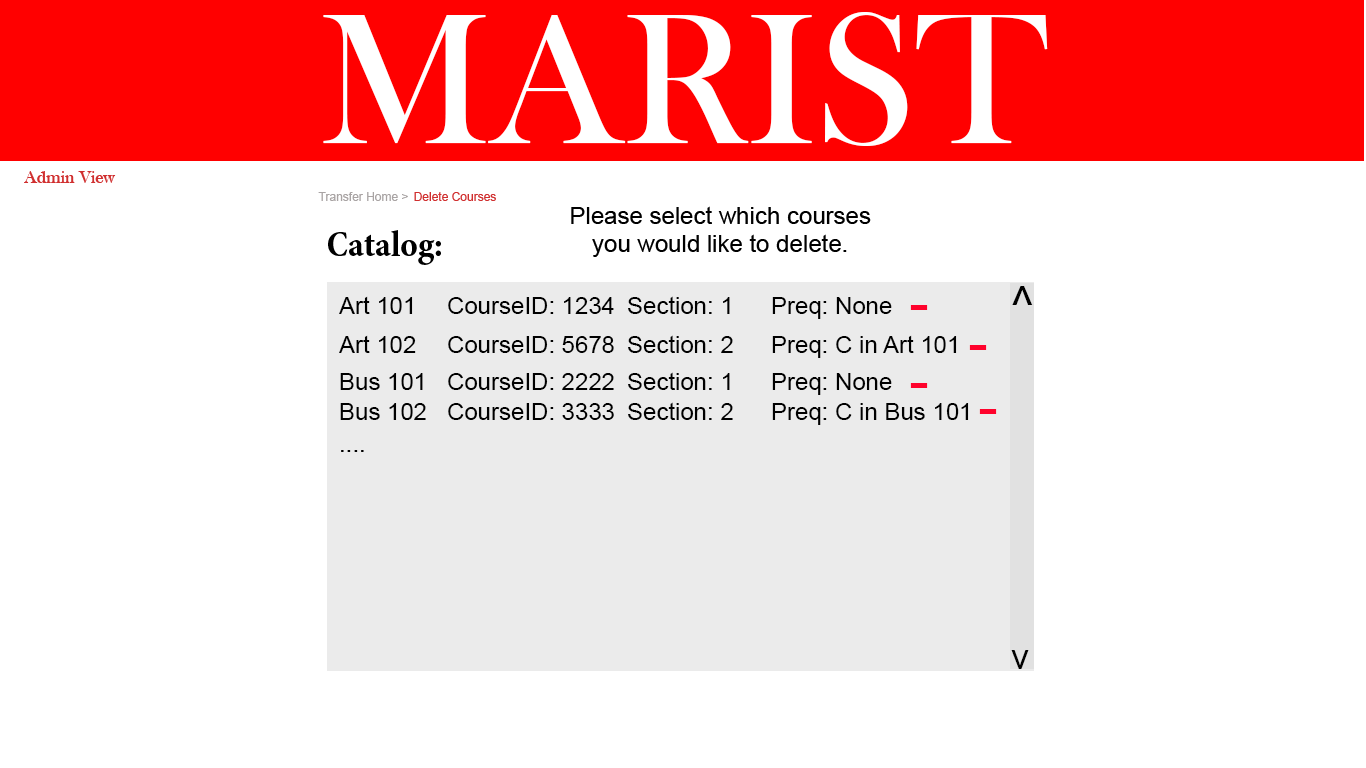
<style>
.page{position:relative;width:1366px;height:768px;background:#ffffff}
.page>*{position:absolute;margin:0}
.t1{font:192px "BaskOldFace";color:#ffffff}
.t2{font:18px "BaskOldFace";color:#d02f2f}
.t3{font:12px "ArialMT";color:#a9a4a4}
.t4{font:12px "ArialMT";color:#d02f2f}
.t5{font:24px "ArialMT";color:#000000}
.t6{font:36px "MinionPro-BoldCn";color:#000000}
.t7{font:48px "ArialMT";color:#000000}
.t8{font:60px "ArialMT";color:#ff022c}
.t9{font:36px "ArialMT";color:#000000}
</style>
<div class="page">
<p class="t1" style="left:323px;top:12px;width:725px;height:134px">MARIST</p>
<p class="t2" style="left:24px;top:171px;width:92px;height:12px">Admin View</p>
<p class="t3" style="left:318px;top:192px;width:90px;height:9px">Transfer Home &gt;</p>
<p class="t4" style="left:414px;top:192px;width:82px;height:9px">Delete Courses</p>
<p class="t5" style="left:571px;top:206px;width:300px;height:51px;text-align:center">Please select which courses you would like to delete.</p>
<p class="t6" style="left:328px;top:230px;width:113px;height:35px">Catalog:</p>
<p class="t7" style="left:1012px;top:286px;width:21px;height:19px">^</p>
<p class="t5" style="left:339px;top:296px;width:553px;height:23px">Art 101 CourseID: 1234 Section: 1  Preq: None</p>
<p class="t8" style="left:910px;top:305px;width:18px;height:5px">-</p>
<p class="t5" style="left:339px;top:335px;width:618px;height:23px">Art 102 CourseID: 5678 Section: 2  Preq: C in Art 101</p>
<p class="t8" style="left:969px;top:345px;width:18px;height:5px">-</p>
<p class="t5" style="left:340px;top:372px;width:552px;height:23px">Bus 101 CourseID: 2222 Section: 1  Preq: None</p>
<p class="t8" style="left:910px;top:383px;width:18px;height:5px">-</p>
<p class="t5" style="left:340px;top:402px;width:629px;height:23px">Bus 102 CourseID: 3333 Section: 2  Preq: C in Bus 101</p>
<p class="t8" style="left:979px;top:409px;width:18px;height:5px">-</p>
<p class="t5" style="left:341px;top:450px;width:23px;height:2px">....</p>
<p class="t9" style="left:1011px;top:650px;width:18px;height:19px">v</p>
</div>
